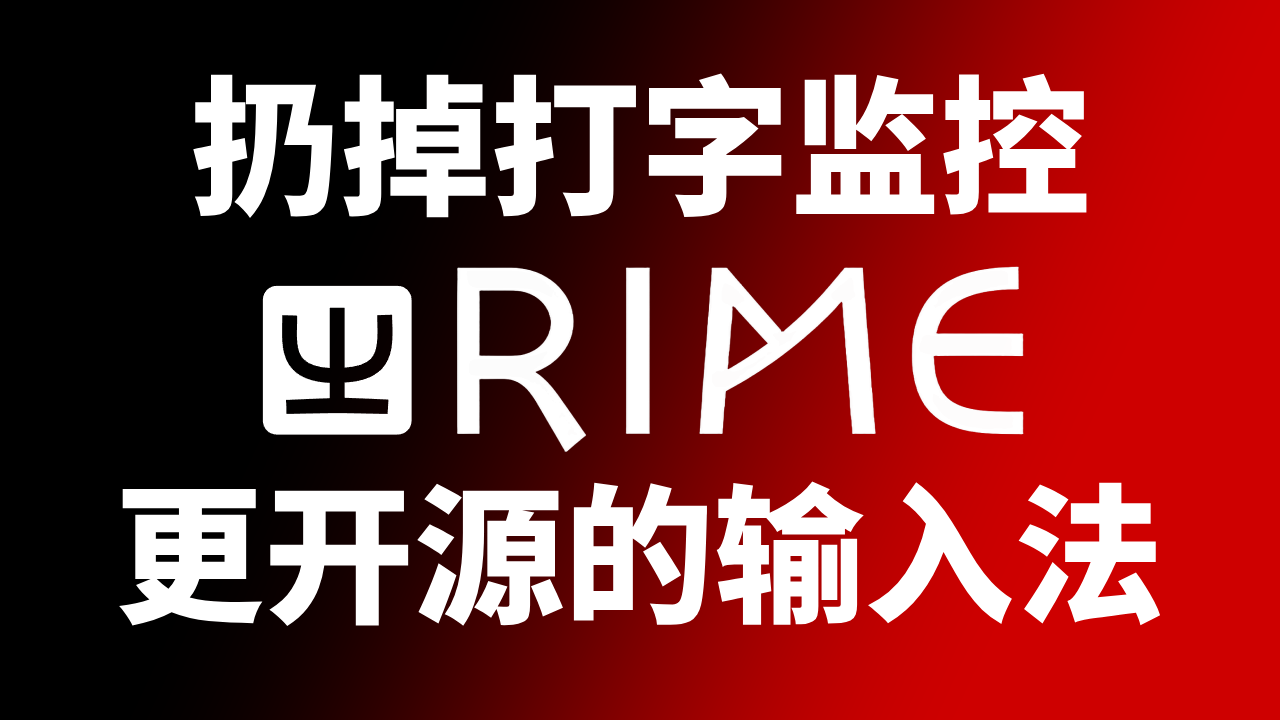
<style>
.page{position:relative;width:1280px;height:720px;background:#000000}
.page>*{position:absolute;margin:0}
.t1{font:150px "SourceHanSansSC-Heavy";color:#ffffff}
</style>
<div class="page">
<p class="t1" style="left:193px;top:73px;width:894px;height:145px">扔掉打字监控</p>
<p class="t1" style="left:119px;top:481px;width:1042px;height:145px">更开源的输入法</p>
</div>
